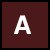
<style>
.page{position:relative;width:50px;height:50px;background:#4b1919}
.page>*{position:absolute;margin:0}
.t1{font:24px "H2gtrE";color:#ffffff}
</style>
<div class="page">
<p class="t1" style="left:14px;top:15px;width:18px;height:19px">A</p>
</div>
